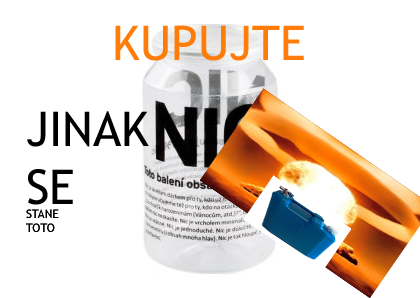
<style>
.page{position:relative;width:420px;height:298px;background:#ffffff}
.page>*{position:absolute;margin:0}
.t1{font:48px "TrebuchetMS";color:#fe7d0a}
.t2{font:12px "TrebuchetMS";color:#000000}
.t3{font:48px "TrebuchetMS";color:#000000}
</style>
<div class="page">
<p class="t1" style="left:115px;top:25px;width:189px;height:36px">KUPUJTE</p>
<p class="t2" style="left:26px;top:111px;width:123px;height:121px"><span class="t3">JINAK<br>SE<br></span>STANE<br>TOTO</p>
</div>
